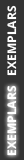
<style>
.page{position:relative;width:24px;height:160px;background:#333333}
.page>*{position:absolute;margin:0}
.t1{font:12px "OpenSans-Bold";color:#fefefe;text-transform:uppercase}
.t2{font:12px "OpenSans-Bold";color:#ffffff;text-transform:uppercase}
</style>
<div class="page">
<p class="t1" style="left:7px;top:5px;width:10px;height:71px;rotate:-90deg">exemplars</p>
<p class="t2" style="left:7px;top:85px;width:10px;height:71px;rotate:-90deg">exemplars</p>
</div>
